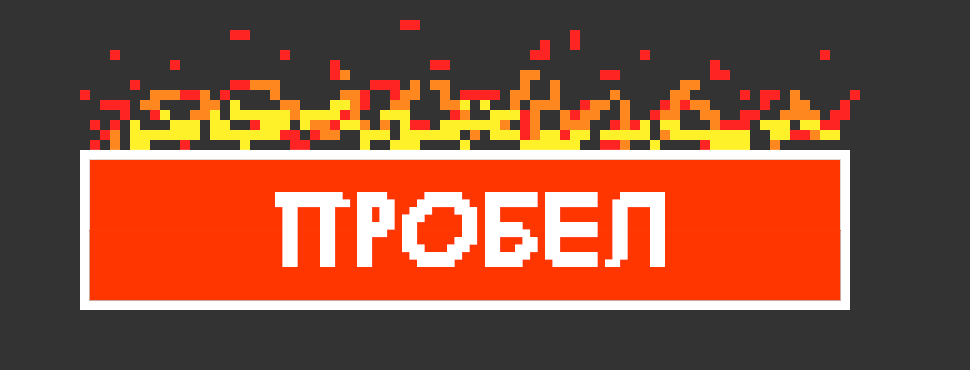
<style>
.page{position:relative;width:970px;height:370px;background:#333333}
.page>*{position:absolute;margin:0}
.t1{font:120px "Comic-Sans-MS-pixel-rus-eng";color:#ffffff}
</style>
<div class="page">
<p class="t1" style="left:275px;top:192px;width:390px;height:75px">ПРОБЕЛ</p>
</div>
